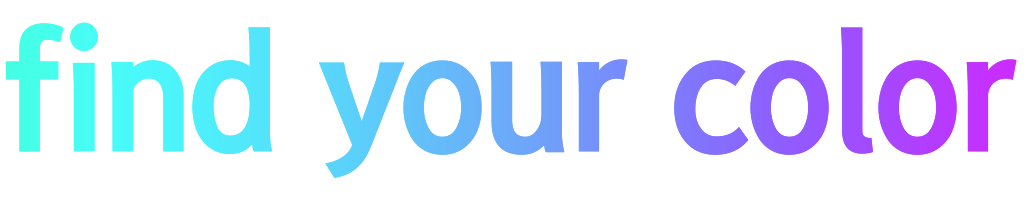
<style>
.page{position:relative;width:1028px;height:200px;background:#ffffff}
.page>*{position:absolute;margin:0}
.t1{font:160px "KoreanGD17-R";letter-spacing:-0.025em}
</style>
<div class="page">
<p class="t1" style="left:6px;top:22px;width:1011px;height:156px">find your color</p>
</div>
